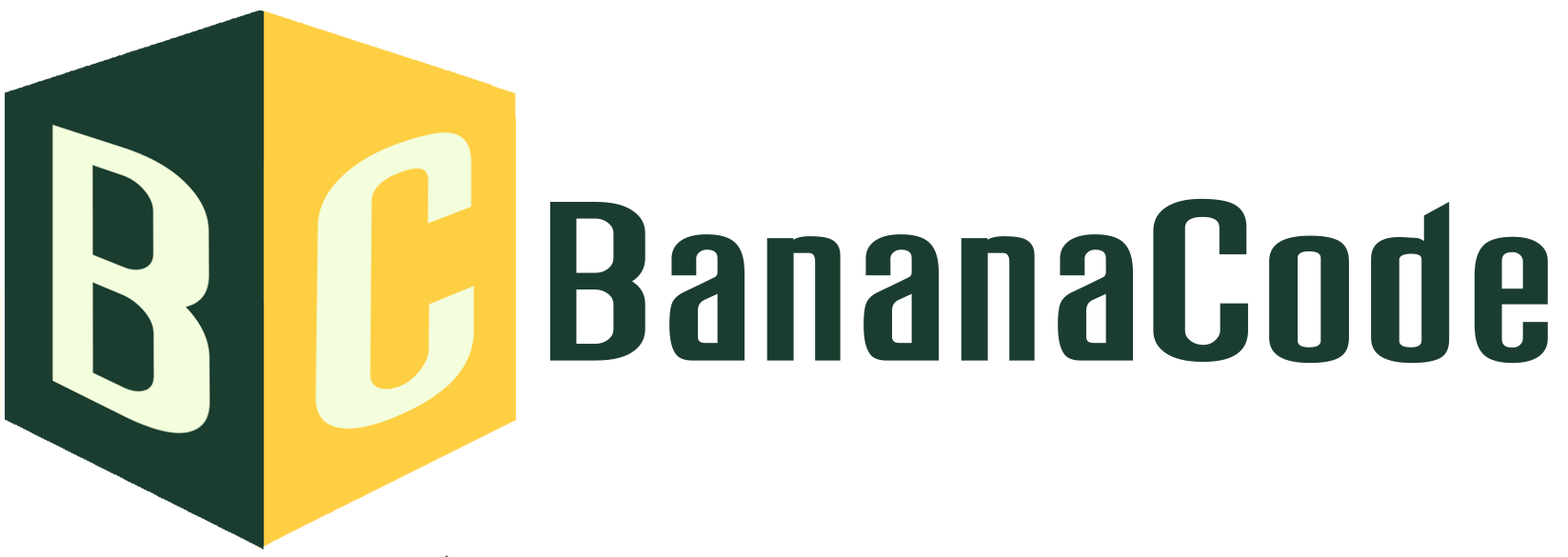
<style>
.page{position:relative;width:1568px;height:557px;background:#ffffff}
.page>*{position:absolute;margin:0}
.t1{font:272.9px "ChiquitaNormal";letter-spacing:0.01em;color:#1b3d2f}
</style>
<div class="page">
<p class="t1" style="left:549px;top:198px;width:999px;height:166px">BananaCode</p>
</div>
